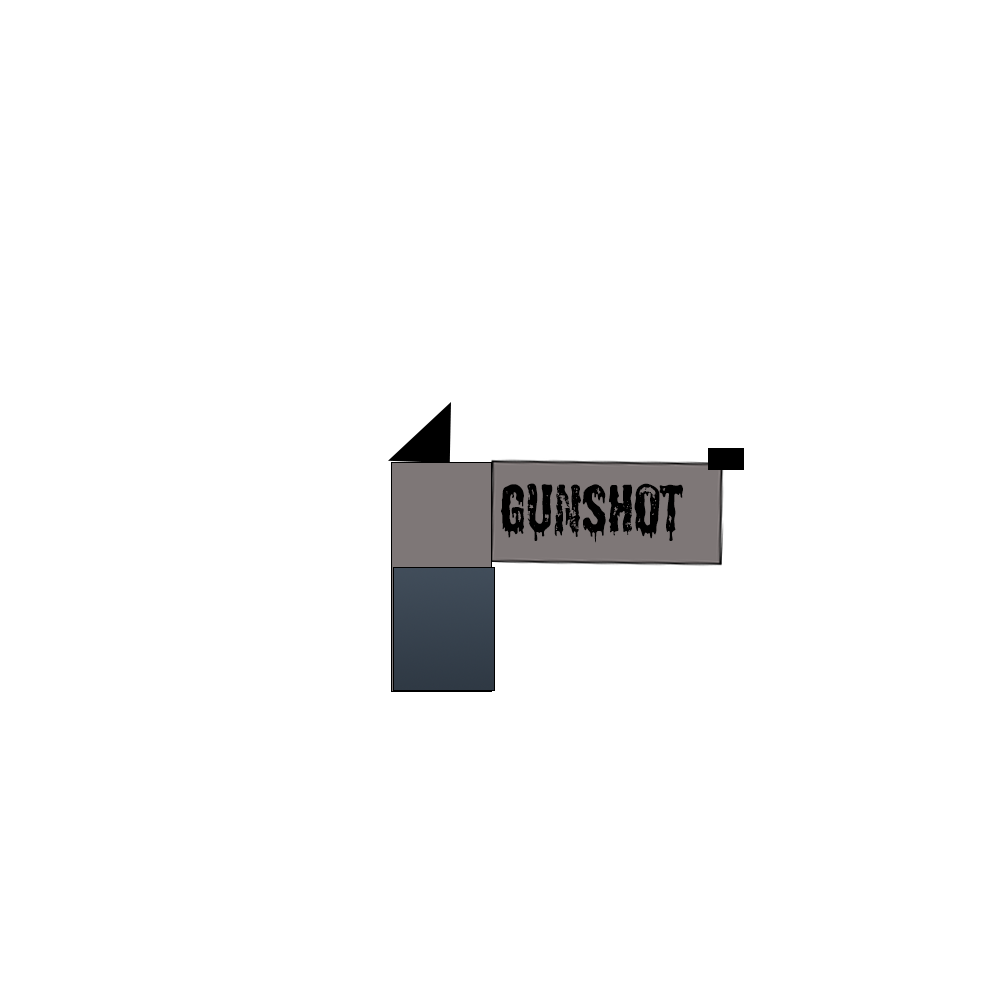
<style>
.page{position:relative;width:1000px;height:1000px;background:#ffffff}
.page>*{position:absolute;margin:0}
.t1{font:65.4px "ShlopShloppy-Regular";color:#000000}
</style>
<div class="page">
<p class="t1" style="left:501px;top:483px;width:182px;height:60px">Gunshot</p>
</div>
